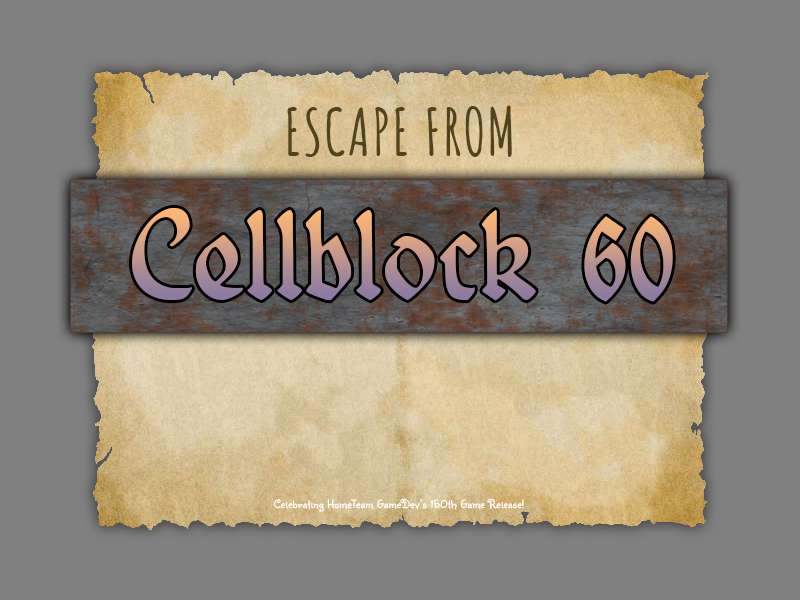
<style>
.page{position:relative;width:800px;height:600px;background:#808080}
.page>*{position:absolute;margin:0}
.t1{font:64px "AmaticSC-Bold";letter-spacing:0.025em;color:#52431f}
.t2{font:137.7px "BelweGotisch";letter-spacing:0.025em;scale:0.75 1}
.t3{font:12px "Sunshiney-Regular";letter-spacing:0.025em;color:#ffffff}
</style>
<div class="page">
<p class="t1" style="left:287px;top:105px;width:225px;height:52px">ESCAPE FROM</p>
<p class="t2" style="left:132px;top:208px;width:541px;height:94px">Cellblock 60</p>
<p class="t3" style="left:273px;top:498px;width:251px;height:14px">Celebrating HomeTeam GameDev’s 150th Game Release!</p>
</div>
